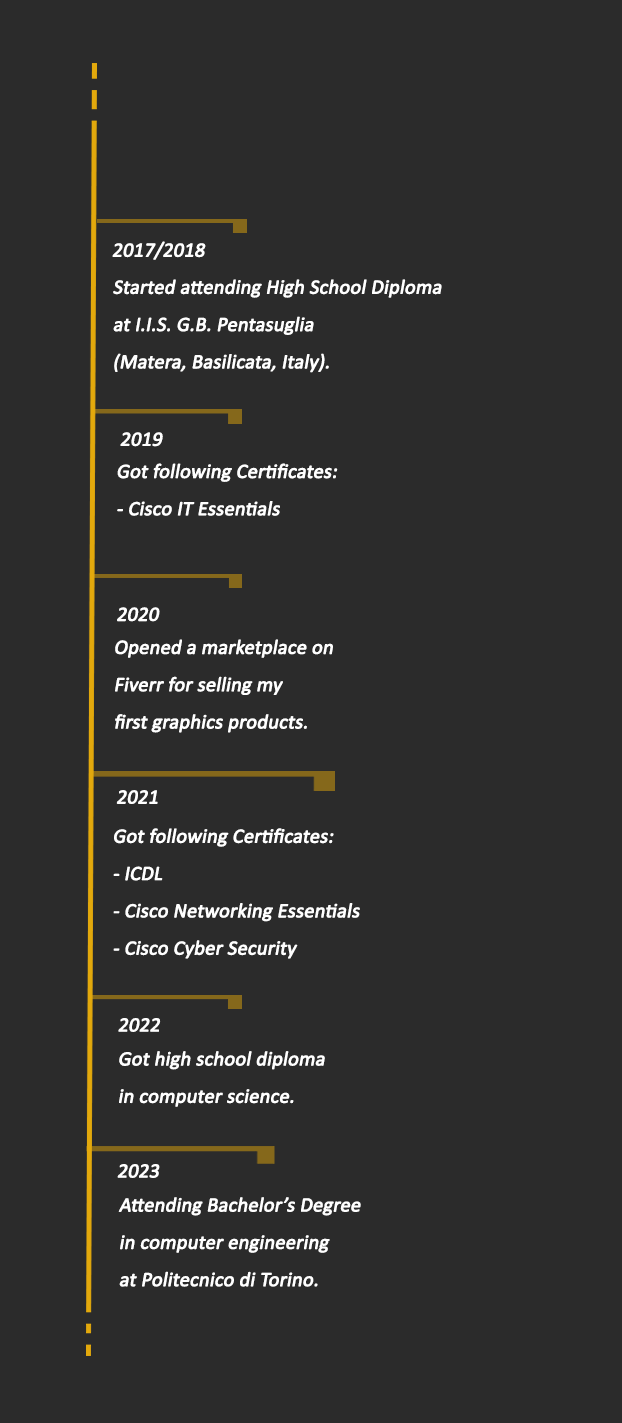
<style>
.page{position:relative;width:622px;height:1423px;background:#2b2b2b}
.page>*{position:absolute;margin:0}
.t1{font:20.3px "Calibri";letter-spacing:-0.015em;color:#ffffff;font-weight:bold;font-style:italic}
.t2{font:20.3px/37.3px "Calibri";letter-spacing:-0.015em;color:#ffffff;font-weight:bold;font-style:italic}
</style>
<div class="page">
<p class="t1" style="left:112px;top:241px;width:94px;height:19px">2017/2018</p>
<p class="t2" style="left:113px;top:279px;width:329px;height:94px">Started attending High School Diploma<br>at I.I.S. G.B. Pentasuglia<br>(Matera, Basilicata, Italy).</p>
<p class="t1" style="left:120px;top:432px;width:43px;height:15px">2019</p>
<p class="t2" style="left:117px;top:463px;width:221px;height:53px">Got following Certificates:<br>- Cisco IT Essentials</p>
<p class="t1" style="left:117px;top:607px;width:43px;height:15px">2020</p>
<p class="t2" style="left:115px;top:639px;width:218px;height:94px">Opened a marketplace on<br>Fiverr for selling my <br>first graphics products.</p>
<p class="t1" style="left:116px;top:790px;width:42px;height:14px">2021</p>
<p class="t2" style="left:113px;top:828px;width:247px;height:131px">Got following Certificates:<br>- ICDL<br>- Cisco Networking Essentials<br>- Cisco Cyber Security</p>
<p class="t1" style="left:118px;top:1018px;width:43px;height:14px">2022</p>
<p class="t2" style="left:119px;top:1051px;width:206px;height:56px">Got high school diploma <br>in computer science.</p>
<p class="t1" style="left:117px;top:1164px;width:43px;height:14px">2023</p>
<p class="t2" style="left:118px;top:1197px;width:243px;height:90px">Attending Bachelor’s Degree <br>in computer engineering<br>at Politecnico di Torino.</p>
</div>
